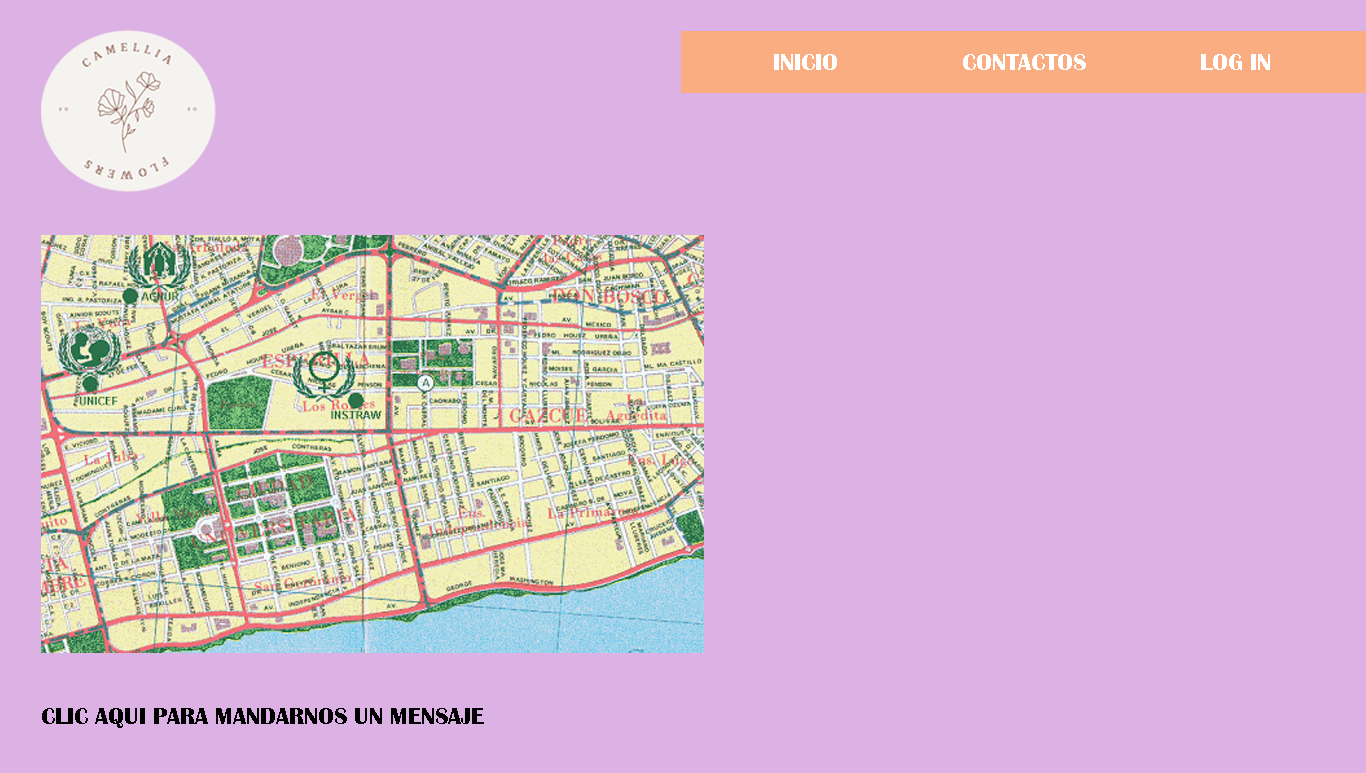
<style>
.page{position:relative;width:1366px;height:773px;background:#dcb1e4}
.page>*{position:absolute;margin:0}
.t1{font:24px "BritannicBold";color:#ffffff}
.t2{font:24px "BritannicBold";color:#000000}
</style>
<div class="page">
<p class="t1" style="left:774px;top:54px;width:63px;height:16px">INICIO</p>
<p class="t1" style="left:963px;top:54px;width:123px;height:16px">CONTACTOS</p>
<p class="t1" style="left:1201px;top:54px;width:69px;height:16px">LOG IN</p>
<p class="t2" style="left:42px;top:708px;width:442px;height:20px">CLIC AQUI PARA MANDARNOS UN MENSAJE</p>
</div>
